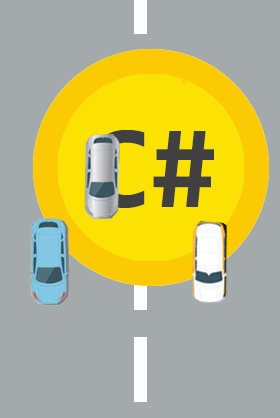
<style>
.page{position:relative;width:280px;height:418px;background:#a4a9ab}
.page>*{position:absolute;margin:0}
.t1{font:118.9px "Consolas-Bold";color:#404040}
</style>
<div class="page">
<p class="t1" style="left:90px;top:130px;width:124px;height:78px">C#</p>
</div>
